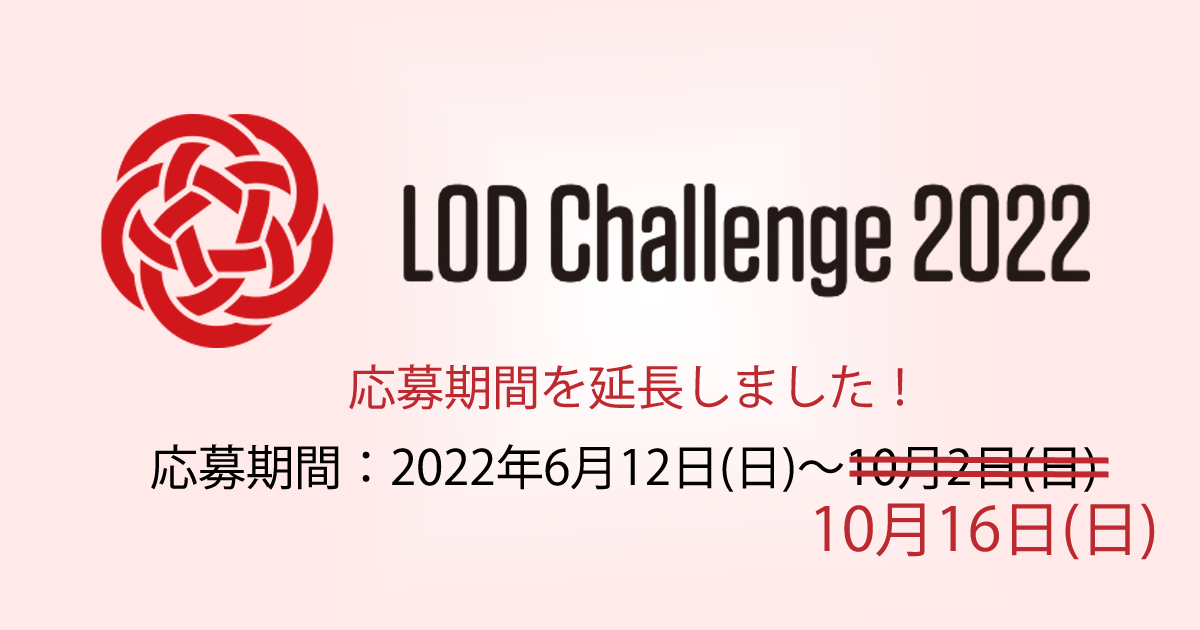
<style>
.page{position:relative;width:1200px;height:630px;background:#ffe9e9}
.page>*{position:absolute;margin:0}
.t1{font:48px "KozGoPro-Regular";color:#bc2a30}
.t2{font:48px "KozGoPro-Regular";color:#000000}
.t3{font:60px "KozGoPro-Regular";color:#bc2a30}
</style>
<div class="page">
<p class="t1" style="left:349px;top:364px;width:555px;height:46px">応募期間を延長しました！</p>
<p class="t2" style="left:151px;top:444px;width:944px;height:48px">応募期間：2022年6月12日(日)～10月2日(日)</p>
<p class="t3" style="left:815px;top:503px;width:340px;height:57px">10月16日(日)</p>
</div>
